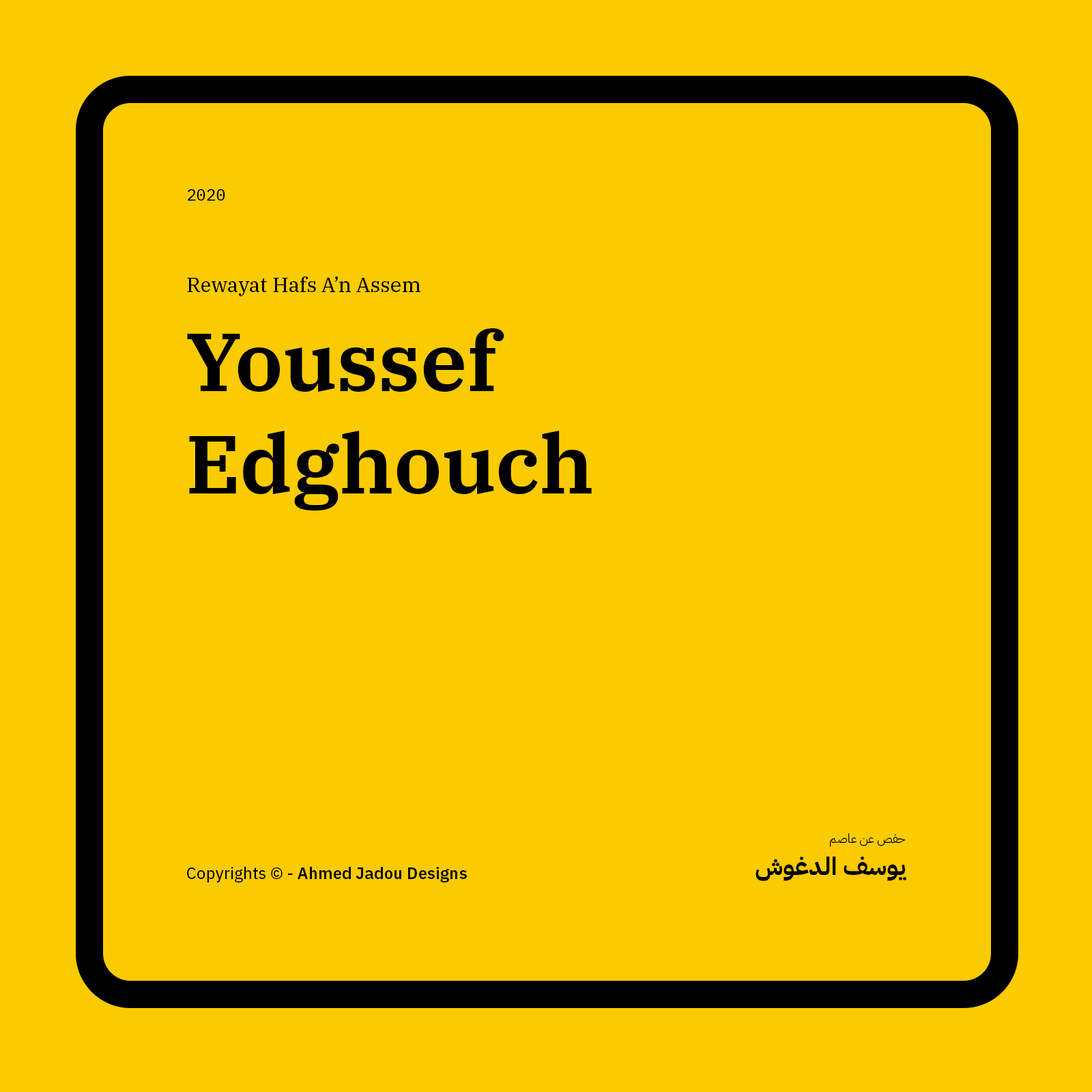
<style>
.page{position:relative;width:1092px;height:1092px;background:#facb00}
.page>*{position:absolute;margin:0}
.t1{font:16.4px "IBMPlexMono-Text";color:#000000}
.t2{font:20.5px "IBMPlexSerif-Text";color:#000000}
.t3{font:81.9px/102.7px "IBMPlexSerif-SemiBold";color:#000000}
.t4{font:12.3px "IBMPlexArabic-Light";color:#000000}
.t5{font:24.6px "IBMPlexArabic-Bold";color:#000000}
.t6{font:16.4px "IBMPlexSans-SemiBold";color:#000000}
.t7{font:16.4px "IBMPlexSans-Text";color:#000000}
</style>
<div class="page">
<p class="t1" style="left:188px;top:189px;width:37px;height:12px">2020</p>
<p class="t2" style="left:187px;top:276px;width:233px;height:20px">Rewayat Hafs A’n Assem</p>
<p class="t3" style="left:187px;top:328px;width:405px;height:183px">Youssef Edghouch</p>
<p class="t4" style="left:830px;top:833px;width:76px;height:14px">حفص عن عاصم</p>
<p class="t5" style="left:756px;top:857px;width:150px;height:24px">يوسف الدغوش</p>
<p class="t6" style="left:187px;top:867px;width:280px;height:15px"><span class="t7">Copyrights © - </span>Ahmed Jadou Designs</p>
</div>
